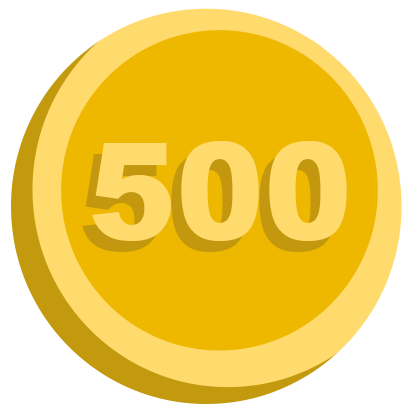
<style>
.page{position:relative;width:412px;height:412px;background:#eeb700}
.page>*{position:absolute;margin:0}
.t1{font:133.5px "Arial-Black";color:#ffda6c}
</style>
<div class="page">
<p class="t1" style="left:92px;top:141px;width:255px;height:100px">500</p>
</div>
